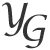
<style>
.page{position:relative;width:50px;height:50px;background:#ffffff}
.page>*{position:absolute;margin:0}
.t1{font:36px "LucidaCalligraphy-Italic";color:#333333}
</style>
<div class="page">
<p class="t1" style="left:2px;top:2px;width:26px;height:35px">Y</p>
<p class="t1" style="left:23px;top:14px;width:25px;height:35px">G</p>
</div>
